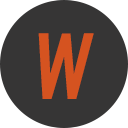
<style>
.page{position:relative;width:128px;height:128px;background:#363535}
.page>*{position:absolute;margin:0}
.t1{font:80px "Oswald-RegularItalic";color:#d55320;text-transform:uppercase;font-weight:bold}
</style>
<div class="page">
<p class="t1" style="left:38px;top:33px;width:56px;height:66px">W</p>
</div>
